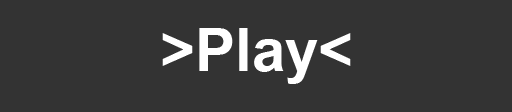
<style>
.page{position:relative;width:512px;height:112px;background:#333333}
.page>*{position:absolute;margin:0}
.t1{font:60px "Arial-BoldMT";color:#ffffff}
</style>
<div class="page">
<p class="t1" style="left:162px;top:28px;width:189px;height:56px">&gt;Play&lt;</p>
</div>
